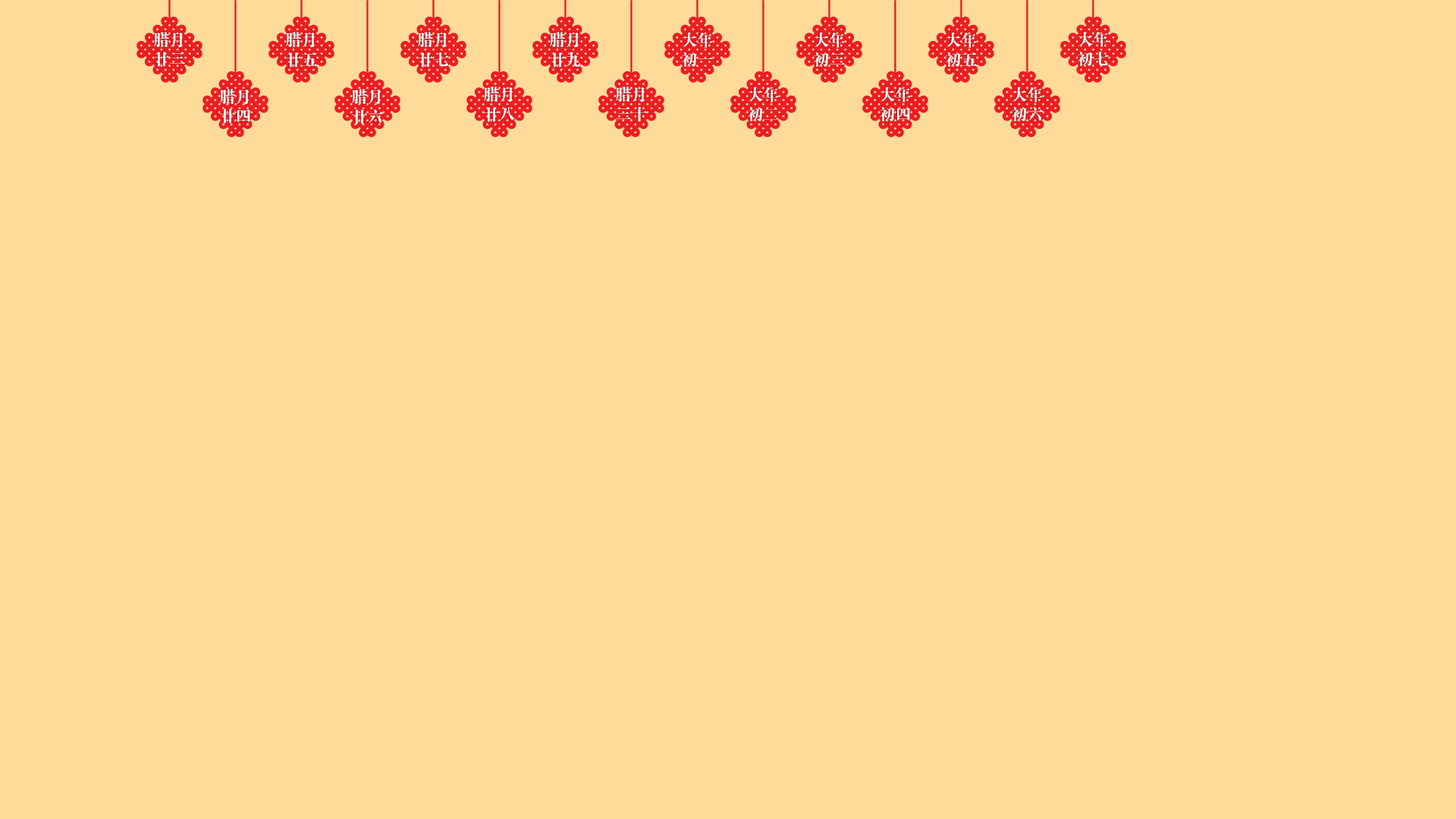
<style>
.page{position:relative;width:1456px;height:819px;background:#ffdb99}
.page>*{position:absolute;margin:0}
.t1{font:16.2px "FZDBSJW--GB1-0";color:#ffffff}
</style>
<div class="page">
<p class="t1" style="left:154px;top:32px;width:31px;height:35px;text-align:center">腊月<br>廿三</p>
<p class="t1" style="left:286px;top:32px;width:32px;height:35px;text-align:center">腊月<br>廿五</p>
<p class="t1" style="left:418px;top:32px;width:31px;height:35px;text-align:center">腊月<br>廿七</p>
<p class="t1" style="left:550px;top:32px;width:31px;height:35px;text-align:center">腊月<br>廿九</p>
<p class="t1" style="left:682px;top:33px;width:31px;height:34px;text-align:center">大年<br>初一</p>
<p class="t1" style="left:814px;top:33px;width:31px;height:34px;text-align:center">大年<br>初三</p>
<p class="t1" style="left:946px;top:33px;width:31px;height:34px;text-align:center">大年<br>初五</p>
<p class="t1" style="left:1078px;top:32px;width:31px;height:34px;text-align:center">大年<br>初七</p>
<p class="t1" style="left:220px;top:89px;width:30px;height:35px;text-align:center">腊月<br>廿四</p>
<p class="t1" style="left:352px;top:89px;width:31px;height:35px;text-align:center">腊月<br>廿六</p>
<p class="t1" style="left:484px;top:86px;width:31px;height:36px;text-align:center">腊月<br>廿八</p>
<p class="t1" style="left:616px;top:86px;width:31px;height:36px;text-align:center">腊月<br>三十</p>
<p class="t1" style="left:748px;top:87px;width:31px;height:34px;text-align:center">大年<br>初二</p>
<p class="t1" style="left:880px;top:87px;width:31px;height:34px;text-align:center">大年<br>初四</p>
<p class="t1" style="left:1012px;top:87px;width:31px;height:34px;text-align:center">大年<br>初六</p>
</div>
